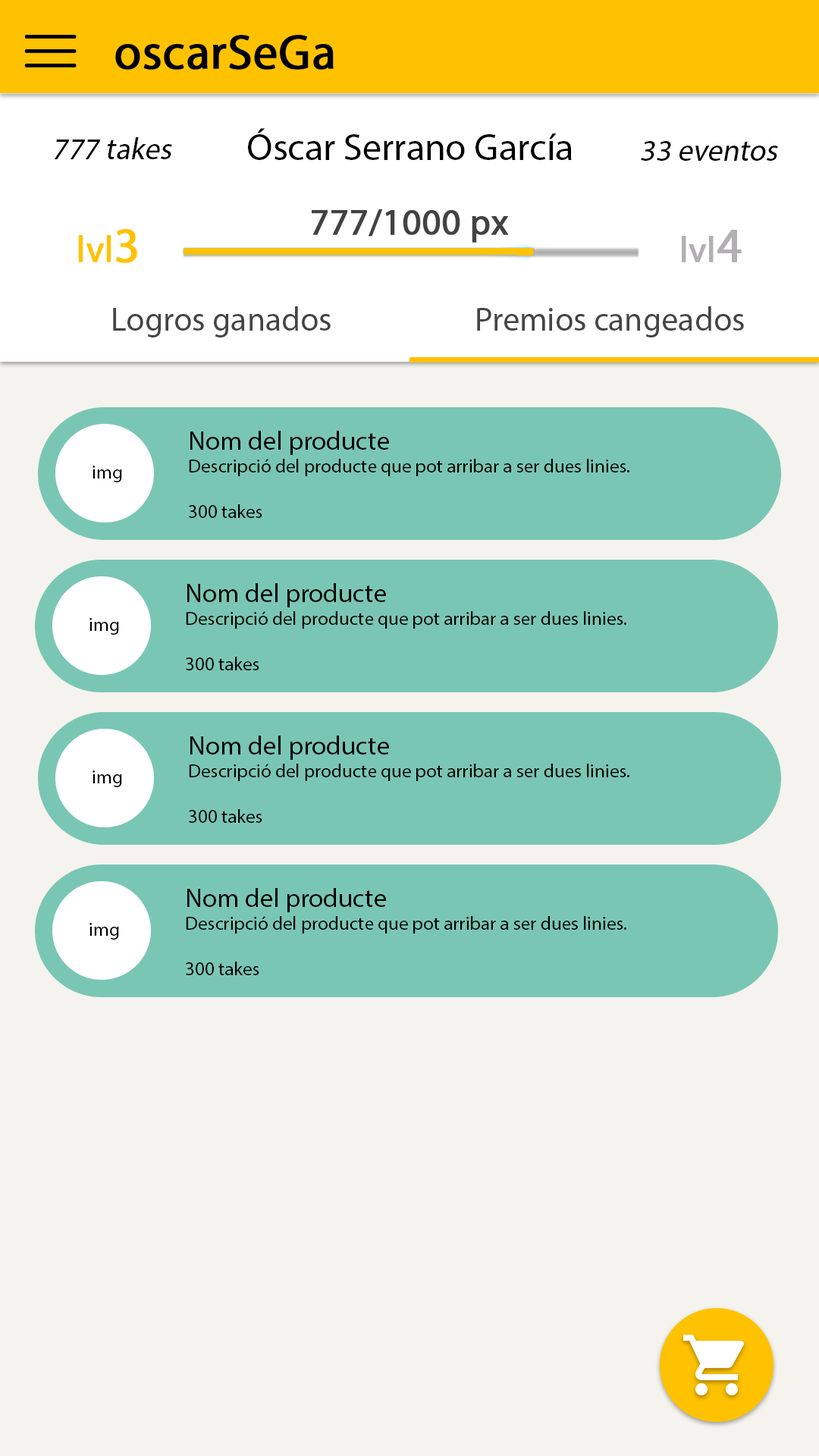
<style>
.page{position:relative;width:819px;height:1456px;background:#f5f3ed}
.page>*{position:absolute;margin:0}
.t1{font:40.9px/14.4px "MyriadPro-Regular";color:#000000;font-weight:bold;scale:2.42 1}
.t2{font:48.5px "MyriadPro-Regular";color:#000000;font-weight:bold}
.t3{font:30.3px "MyriadPro-Regular";color:#000000;font-style:italic}
.t4{font:37.9px "MyriadPro-Regular";color:#000000}
.t5{font:36.4px "MyriadPro-Regular";color:#424242;font-weight:bold}
.t6{font:36.4px "MyriadPro-Regular";color:#ffc200;font-weight:bold}
.t7{font:48.5px "MyriadPro-Regular";color:#ffc200;font-weight:bold}
.t8{font:35.6px "MyriadPro-Regular";color:#b3b0b3;font-weight:bold}
.t9{font:48.5px "MyriadPro-Regular";color:#b3b0b3;font-weight:bold}
.t10{font:33.4px "MyriadPro-Regular";color:#444444}
.t11{font:19px "MyriadPro-Regular";color:#000000}
.t12{font:26.5px "MyriadPro-Regular";color:#000000}
</style>
<div class="page">
<p class="t1" style="left:24px;top:34px;width:53px;height:33px;text-align:center">_<br>_<br>_</p>
<p class="t2" style="left:115px;top:35px;width:219px;height:35px">oscarSeGa</p>
<p class="t3" style="left:54px;top:137px;width:118px;height:22px">777 takes</p>
<p class="t4" style="left:248px;top:128px;width:324px;height:32px">Óscar Serrano García</p>
<p class="t3" style="left:641px;top:141px;width:137px;height:20px">33 eventos</p>
<p class="t5" style="left:312px;top:209px;width:197px;height:34px">777/1000 px</p>
<p class="t6" style="left:78px;top:229px;width:59px;height:34px">lvl<span class="t7">3</span></p>
<p class="t8" style="left:682px;top:230px;width:60px;height:32px">lvl<span class="t9">4</span></p>
<p class="t10" style="left:113px;top:306px;width:218px;height:31px">Logros ganados</p>
<p class="t10" style="left:477px;top:306px;width:267px;height:31px">Premios cangeados</p>
<p class="t11" style="left:189px;top:431px;width:440px;height:87px"><span class="t12">Nom del producte<br></span>Descripció del producte que pot arribar a ser dues linies.<br><br>300 takes</p>
<p class="t11" style="left:93px;top:466px;width:29px;height:16px">img</p>
<p class="t11" style="left:186px;top:583px;width:440px;height:87px"><span class="t12">Nom del producte<br></span>Descripció del producte que pot arribar a ser dues linies.<br><br>300 takes</p>
<p class="t11" style="left:89px;top:618px;width:30px;height:17px">img</p>
<p class="t11" style="left:189px;top:736px;width:440px;height:87px"><span class="t12">Nom del producte<br></span>Descripció del producte que pot arribar a ser dues linies.<br><br>300 takes</p>
<p class="t11" style="left:93px;top:770px;width:29px;height:17px">img</p>
<p class="t11" style="left:186px;top:888px;width:440px;height:87px"><span class="t12">Nom del producte<br></span>Descripció del producte que pot arribar a ser dues linies.<br><br>300 takes</p>
<p class="t11" style="left:89px;top:923px;width:30px;height:17px">img</p>
</div>
